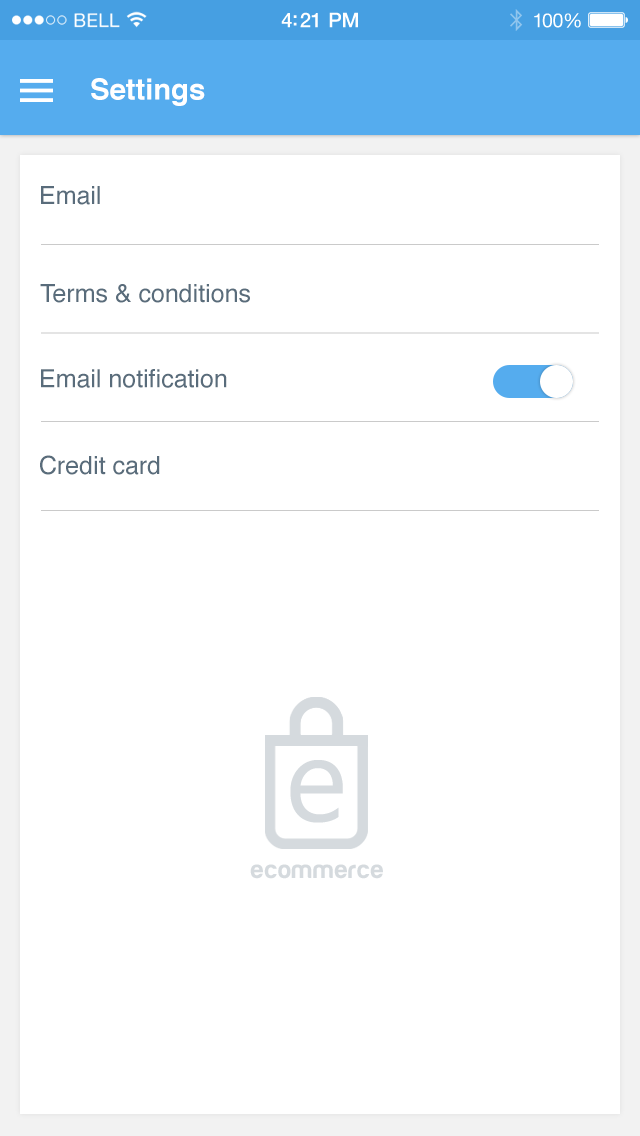
<style>
.page{position:relative;width:640px;height:1136px;background:#ffffff}
.page>*{position:absolute;margin:0}
.t1{font:20.4px "HelveticaNeue-Medium";letter-spacing:-0.02em;color:#ffffff}
.t2{font:19.6px "HelveticaNeue";letter-spacing:-0.02em;color:#ffffff}
.t3{font:29.2px "Helvetica-Bold";color:#ffffff}
.t4{font:25px "Helvetica";color:#596c7b}
</style>
<div class="page">
<p class="t1" style="left:281px;top:12px;width:77px;height:16px">4:21 PM</p>
<p class="t2" style="left:534px;top:13px;width:47px;height:15px">100%</p>
<p class="t3" style="left:91px;top:78px;width:114px;height:28px">Settings</p>
<p class="t4" style="left:41px;top:186px;width:59px;height:19px">Email</p>
<p class="t4" style="left:40px;top:284px;width:210px;height:19px">Terms &amp; conditions</p>
<p class="t4" style="left:41px;top:369px;width:186px;height:19px">Email notification</p>
<p class="t4" style="left:40px;top:455px;width:120px;height:20px">Credit card</p>
</div>
